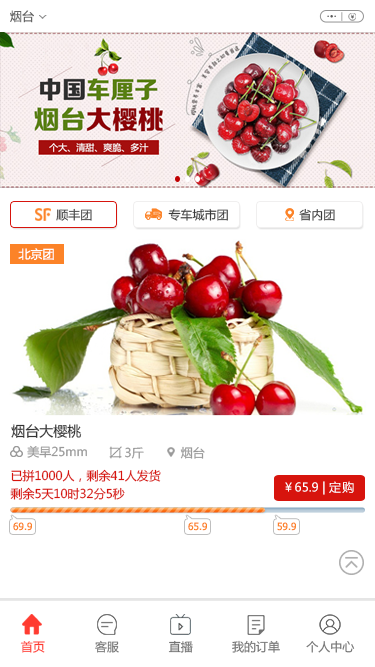
<style>
.page{position:relative;width:375px;height:667px;background:#ffffff}
.page>*{position:absolute;margin:0}
.t1{font:12px "MicrosoftYaHei";color:#666666}
.t2{font:12px "MicrosoftYaHei"}
.t3{font:12px "MicrosoftYaHei";color:#3a3a3a}
.t4{font:12px "MicrosoftYaHei";color:#ffffff}
.t5{font:14px "MicrosoftYaHei";color:#333333}
.t6{font:12px "MicrosoftYaHei";color:#a4a3a3}
.t7{font:12px/18px "MicrosoftYaHei";color:#d7140d}
.t8{font:12px "MicrosoftYaHei";letter-spacing:0.1em;color:#ffffff}
.t9{font:10px "Tahoma";color:#fc8328}
.t10{font:12px "MicrosoftYaHei";color:#ff3b30}
.t11{font:12px "MicrosoftYaHei";color:#727272}
</style>
<div class="page">
<p class="t1" style="left:10px;top:10px;width:24px;height:13px">烟台</p>
<p class="t2" style="left:56px;top:208px;width:36px;height:13px">顺丰团</p>
<p class="t3" style="left:168px;top:208px;width:60px;height:13px">专车城市团</p>
<p class="t3" style="left:299px;top:208px;width:36px;height:13px">省内团</p>
<p class="t4" style="left:18px;top:248px;width:36px;height:12px">北京团</p>
<p class="t5" style="left:11px;top:424px;width:71px;height:14px">烟台大樱桃</p>
<p class="t6" style="left:27px;top:445px;width:60px;height:13px">美早25mm</p>
<p class="t6" style="left:125px;top:447px;width:19px;height:12px">3斤</p>
<p class="t6" style="left:180px;top:446px;width:25px;height:13px">烟台</p>
<p class="t7" style="left:10px;top:469px;width:151px;height:31px">已拼1000人，剩余41人发货<br>剩余5天10时32分5秒</p>
<p class="t4" style="left:285px;top:481px;width:69px;height:14px">￥65.9 | <span class="t8">定购</span></p>
<p class="t9" style="left:13px;top:522px;width:19px;height:9px">69.9</p>
<p class="t9" style="left:188px;top:522px;width:19px;height:9px">65.9</p>
<p class="t9" style="left:277px;top:522px;width:19px;height:9px">59.9</p>
<p class="t10" style="left:20px;top:641px;width:25px;height:12px">首页</p>
<p class="t11" style="left:95px;top:640px;width:24px;height:13px">客服</p>
<p class="t11" style="left:168px;top:640px;width:25px;height:13px">直播</p>
<p class="t11" style="left:232px;top:640px;width:48px;height:13px">我的订单</p>
<p class="t11" style="left:306px;top:640px;width:49px;height:13px">个人中心</p>
</div>
